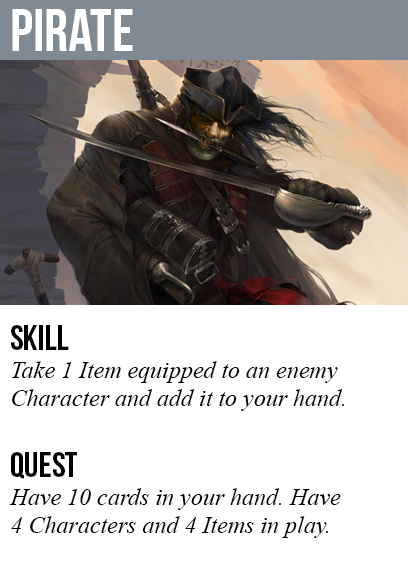
<style>
.page{position:relative;width:408px;height:585px;background:#ffffff}
.page>*{position:absolute;margin:0}
.t1{font:60px "BebasNeue";color:#ffffff}
.t2{font:36px "BebasNeue";color:#000000}
.t3{font:24px "TimesNewRomanPS-ItalicMT";color:#000000}
</style>
<div class="page">
<p class="t1" style="left:12px;top:9px;width:121px;height:42px">pirate</p>
<p class="t2" style="left:11px;top:325px;width:58px;height:25px">skill</p>
<p class="t3" style="left:12px;top:361px;width:333px;height:50px">Take 1 Item equipped to an enemy<br>Character and add it to your hand.</p>
<p class="t2" style="left:11px;top:452px;width:66px;height:27px">quest</p>
<p class="t3" style="left:9px;top:488px;width:332px;height:50px">Have 10 cards in your hand. Have<br>4 Characters and 4 Items in play.</p>
</div>
